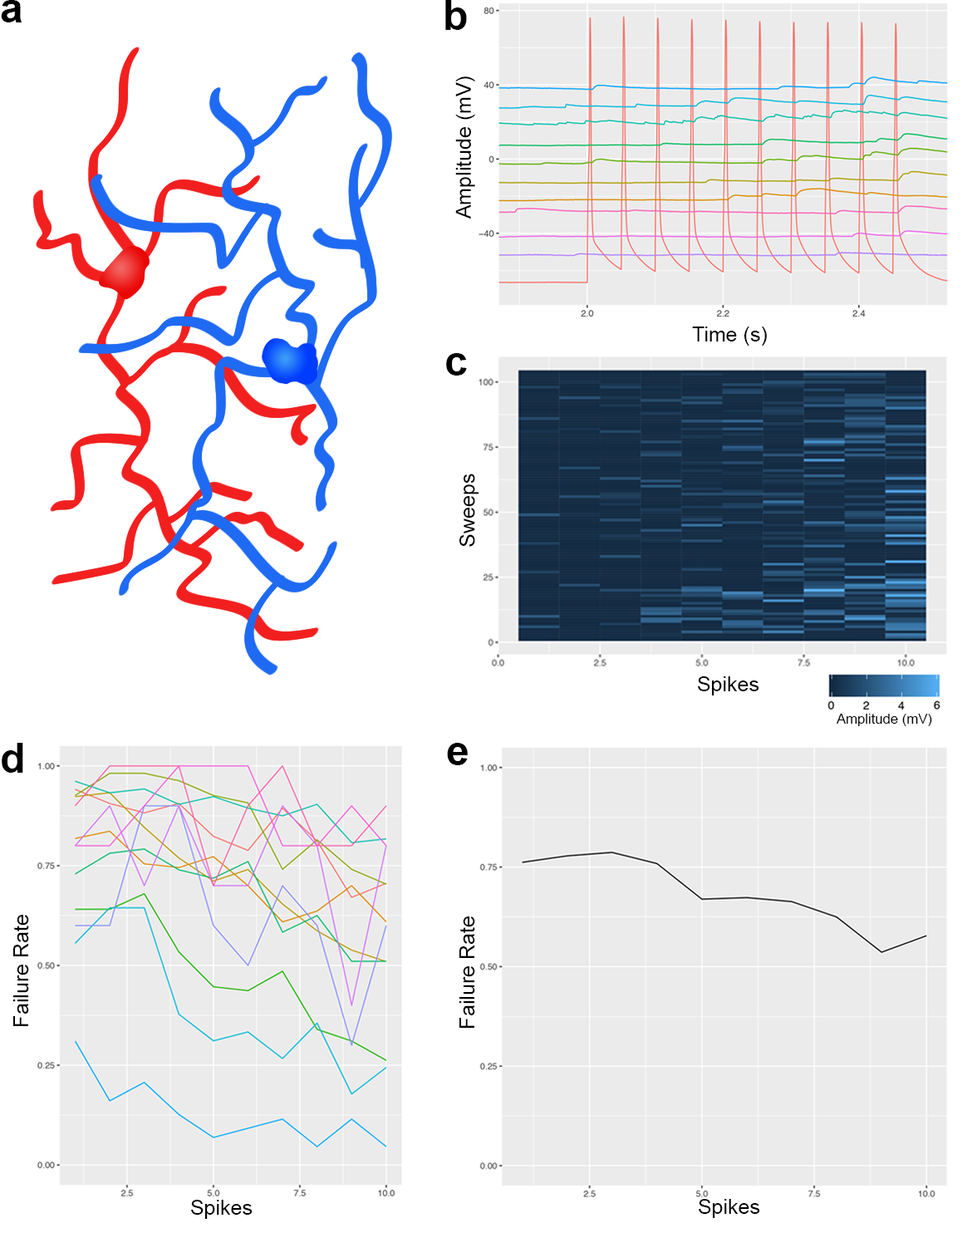
<style>
.page{position:relative;width:967px;height:1233px;background:#ffffff}
.page>*{position:absolute;margin:0}
.t1{font:41.5px "Arial-BoldMT";color:#000000}
.t2{font:20.8px "ArialMT";color:#000000}
.t3{font:13.8px "ArialMT";color:#000000}
.t4{font:10px "Arial-BoldMT";color:#000000}
</style>
<div class="page">
<p class="t1" style="left:1px;top:0px;width:21px;height:22px">a</p>
<p class="t1" style="left:445px;top:0px;width:22px;height:30px">b</p>
<p class="t2" style="left:455px;top:76px;width:20px;height:143px;rotate:-90deg">Amplitude (mV)</p>
<p class="t2" style="left:692px;top:327px;width:75px;height:19px">Time (s)</p>
<p class="t1" style="left:446px;top:353px;width:21px;height:23px">c</p>
<p class="t2" style="left:459px;top:474px;width:20px;height:73px;rotate:-90deg">Sweeps</p>
<p class="t2" style="left:698px;top:676px;width:61px;height:19px">Spikes</p>
<p class="t3" style="left:837px;top:714px;width:95px;height:12px">Amplitude (mV)</p>
<p class="t4" style="left:2px;top:743px;width:21px;height:30px">d</p>
<p class="t4" style="left:447px;top:743px;width:21px;height:22px">e</p>
<p class="t2" style="left:13px;top:915px;width:16px;height:111px;rotate:-90deg">Failure Rate</p>
<p class="t2" style="left:459px;top:916px;width:16px;height:112px;rotate:-90deg">Failure Rate</p>
<p class="t2" style="left:191px;top:1200px;width:62px;height:19px">Spikes</p>
<p class="t2" style="left:699px;top:1199px;width:61px;height:19px">Spikes</p>
</div>
